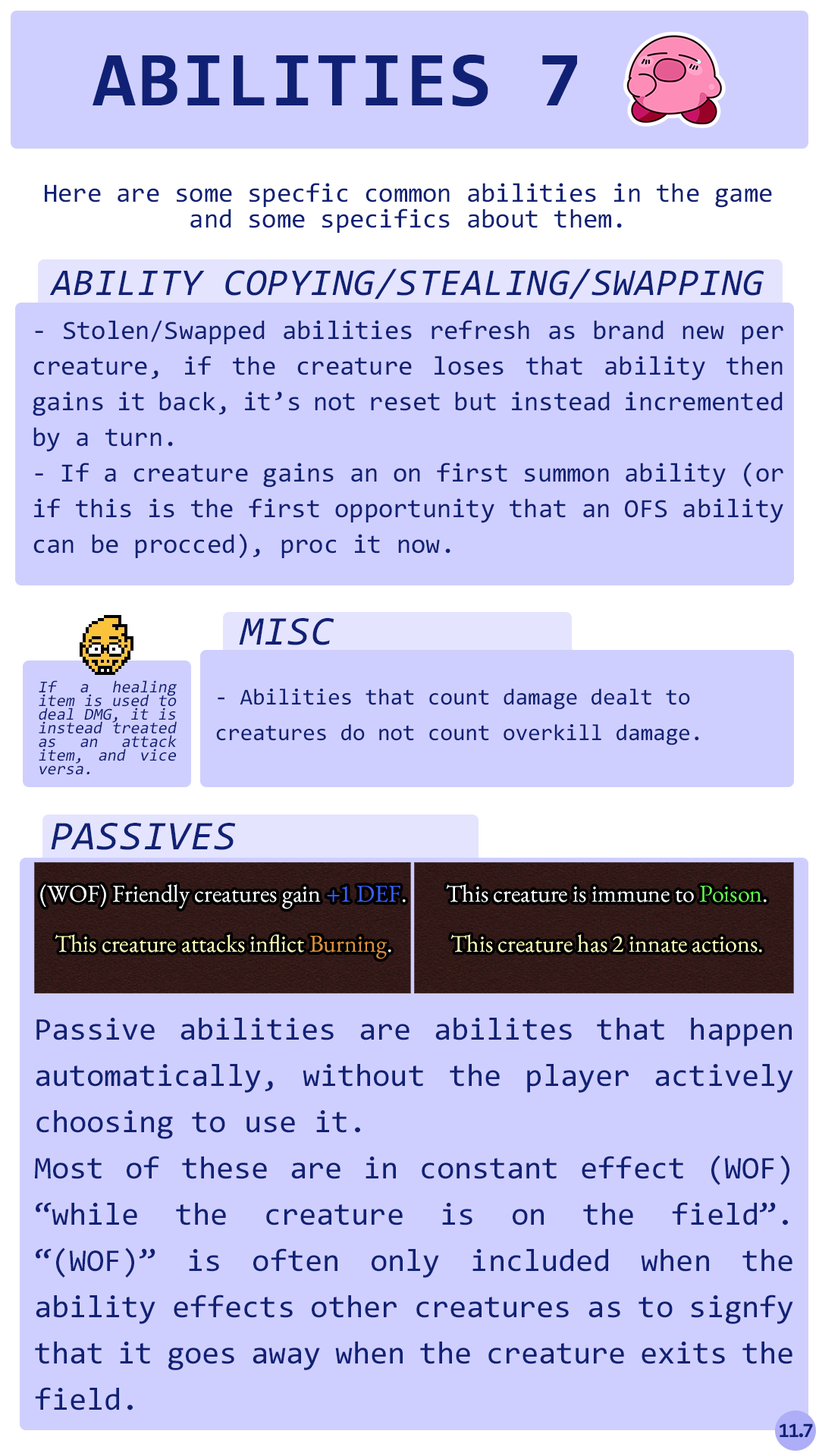
<style>
.page{position:relative;width:819px;height:1456px;background:#cfcfff}
.page>*{position:absolute;margin:0}
.t1{font:78.3px "Consolas-Bold";letter-spacing:0.02em;color:#102175}
.t2{font:26.5px/25.8px "Consolas";color:#102175}
.t3{font:37.9px "Consolas-Italic";letter-spacing:0.02em;color:#102175;text-transform:uppercase}
.t4{font:26.5px/35.6px "Consolas";color:#102175}
.t5{font:41.1px "Consolas-Italic";letter-spacing:0.02em;color:#102175}
.t6{font:16.7px/13.6px "Consolas";color:#102175;font-style:italic}
.t7{font:22.7px/35.6px "Consolas";color:#102175}
.t8{font:24.3px/50px "EBGaramond-Regular";color:#ffffff}
.t9{font:24.3px/50px "EBGaramond-Regular";color:#3c5ff4}
.t10{font:24.3px/50px "EBGaramond-Regular";color:#fffdba}
.t11{font:24.3px/50px "EBGaramond-Regular";color:#db923d}
.t12{font:24.3px/50px "EBGaramond-Regular";color:#66f24f}
.t13{font:31.8px/46.3px "Consolas";color:#102175}
.t14{font:20.5px "Consolas-Bold";letter-spacing:-0.06em;color:#102175}
.t15{font:20.5px "Consolas-Bold";letter-spacing:-0.2em;color:#102175}
.t16{font:20.5px "Consolas-Bold";letter-spacing:-0.22em;color:#102175}
</style>
<div class="page">
<p class="t1" style="left:93px;top:55px;width:484px;height:52px">ABILITIES 7</p>
<p class="t2" style="left:45px;top:183px;width:727px;height:50px;text-align:center">Here are some specfic common abilities in the game and some specifics about them.</p>
<p class="t3" style="left:49px;top:268px;width:715px;height:32px">Ability Copying/Stealing/Swapping</p>
<p class="t4" style="left:33px;top:320px;width:750px;height:239px;text-align:justify">- Stolen/Swapped abilities refresh as brand new per creature, if the creature loses that ability then gains it back, it’s not reset but instead incremented by a turn.<br>- If a creature gains an on first summon ability (or if this is the first opportunity that an OFS ability can be procced), proc it now.</p>
<p class="t5" style="left:239px;top:618px;width:95px;height:27px">MISC</p>
<p class="t6" style="left:39px;top:680px;width:138px;height:95px;text-align:justify">If a healing item is used to deal DMG, it is instead treated as an attack item, and vice versa.</p>
<p class="t7" style="left:216px;top:689px;width:483px;height:56px">- Abilities that count damage dealt to creatures do not count overkill damage.</p>
<p class="t5" style="left:51px;top:823px;width:185px;height:27px">PASSIVES</p>
<p class="t8" style="left:40px;top:884px;width:366px;height:75px;text-align:center">(WOF) Friendly creatures gain <span class="t9">+1 DEF</span>.<br><span class="t10">This creature attacks inflict </span><span class="t11">Burning</span>.</p>
<p class="t10" style="left:446px;top:884px;width:321px;height:68px;text-align:center"><span class="t8">This creature is immune to </span><span class="t12">Poison</span><span class="t8">.<br></span>This creature has 2 innate actions.</p>
<p class="t13" style="left:35px;top:1018px;width:758px;height:392px;text-align:justify">Passive abilities are abilites that happen automatically, without the player actively choosing to use it.<br>Most of these are in constant effect (WOF) “while the creature is on the field”. “(WOF)” is often only included when the ability effects other creatures as to signfy that it goes away when the creature exits the field.</p>
<p class="t14" style="left:779px;top:1423px;width:34px;height:15px">1<span class="t15">1</span><span class="t16">.</span>7</p>
</div>
